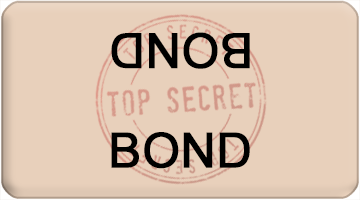
<style>
.page{position:relative;width:360px;height:200px;background:#e8d0bb}
.page>*{position:absolute;margin:0}
.t1{font:48px "ArialMT";color:#000000;font-weight:bold}
</style>
<div class="page">
<p class="t1" style="left:111px;top:32px;width:139px;height:37px;rotate:180deg">BOND</p>
<p class="t1" style="left:111px;top:132px;width:139px;height:37px">BOND</p>
</div>
